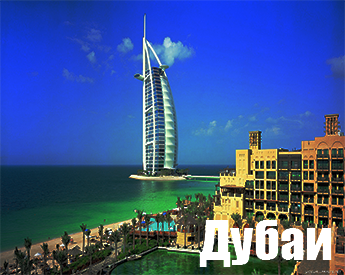
<style>
.page{position:relative;width:345px;height:275px}
.page>*{position:absolute;margin:0}
.t1{font:50px "Impact";color:#ffffff}
</style>
<div class="page">
<p class="t1" style="left:199px;top:220px;width:133px;height:47px">Дубаи</p>
</div>
